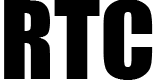
<style>
.page{position:relative;width:155px;height:80px;background:#000000}
.page>*{position:absolute;margin:0}
.t1{font:100px "Impact";color:#000000}
</style>
<div class="page">
<p class="t1" style="left:4px;top:0px;width:149px;height:80px">RTC</p>
</div>
